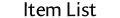
<style>
.page{position:relative;width:120px;height:18px;background:#ffffff}
.page>*{position:absolute;margin:0}
.t1{font:20px "Amira-Roman";color:#000000}
</style>
<div class="page">
<p class="t1" style="left:24px;top:2px;width:73px;height:15px;opacity:0.96">Item List</p>
</div>
